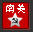
<style>
.page{position:relative;width:33px;height:32px;background:#c50000}
.page>*{position:absolute;margin:0}
.t1{font:10.4px "SimSun";color:#ffffff}
</style>
<div class="page">
<p class="t1" style="left:6px;top:4px;width:19px;height:9px">南美</p>
</div>
